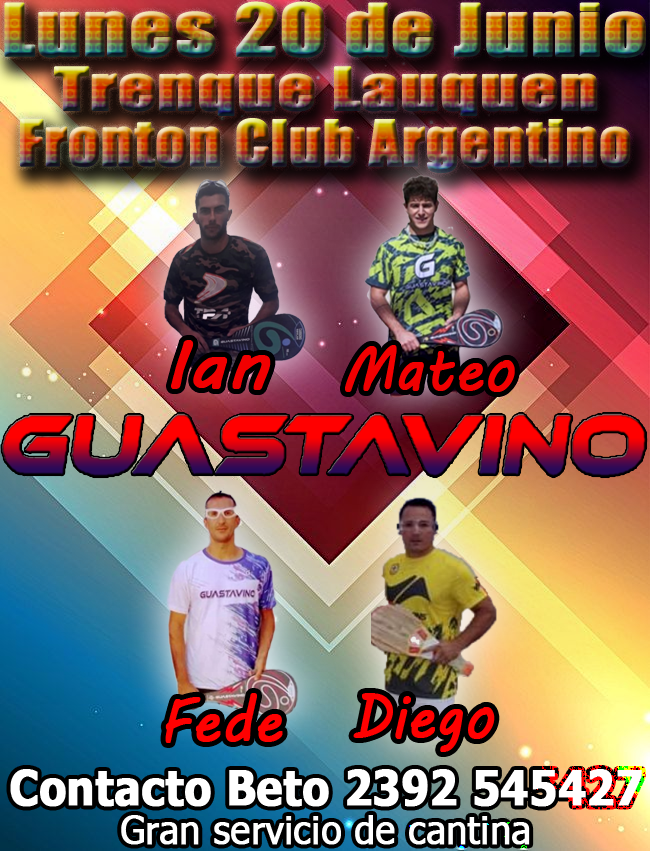
<style>
.page{position:relative;width:650px;height:851px}
.page>*{position:absolute;margin:0}
.t1{font:66.3px "Impact";font-weight:bold;scale:1.28 1}
.t2{font:54.5px "Impact";font-weight:bold;scale:1.34 1}
.t3{font:58.2px "Impact";font-weight:bold;scale:1.06 1}
.t4{font:67.2px "MVBoli";color:#ff0101;font-weight:bold;scale:1.12 1}
.t5{font:61.1px "MVBoli";color:#ff0101;font-weight:bold;scale:0.91 1}
.t6{font:62.1px "MVBoli";color:#ff0101;font-weight:bold;scale:0.91 1}
.t7{font:61px "MVBoli";color:#ff0101;font-weight:bold;scale:0.91 1}
.t8{font:48.2px "Tahoma-Bold";color:#ffffff;font-weight:bold;scale:0.89 1}
.t9{font:38.5px "Tahoma";color:#ffffff;font-weight:bold;scale:0.95 1}
</style>
<div class="page">
<p class="t1" style="left:4px;top:1px;width:642px;height:57px">Lunes 20 de Junio</p>
<p class="t2" style="left:54px;top:66px;width:544px;height:50px">Trenque Lauquen</p>
<p class="t3" style="left:20px;top:118px;width:611px;height:56px">Fronton Club Argentino</p>
<p class="t4" style="left:171px;top:340px;width:100px;height:50px">Ian</p>
<p class="t5" style="left:345px;top:345px;width:170px;height:47px">Mateo</p>
<p class="t6" style="left:165px;top:693px;width:118px;height:50px">Fede</p>
<p class="t7" style="left:353px;top:693px;width:142px;height:59px">Diego</p>
<p class="t8" style="left:10px;top:769px;width:632px;height:38px">Contacto Beto 2392 545427</p>
<p class="t9" style="left:121px;top:815px;width:409px;height:30px">Gran servicio de cantina</p>
</div>
